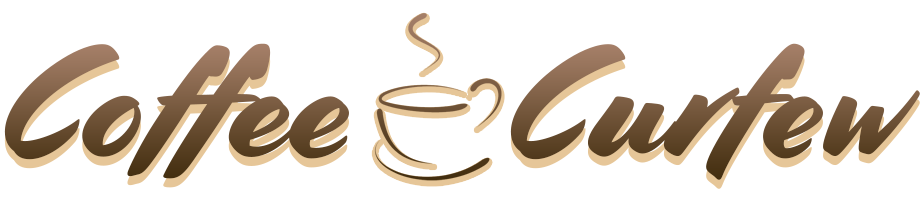
<style>
.page{position:relative;width:924px;height:200px;background:#ffffff}
.page>*{position:absolute;margin:0}
.t1{font:158.3px "Cortado";letter-spacing:0.01em}
</style>
<div class="page">
<p class="t1" style="left:4px;top:43px;width:916px;height:137px">Coffee      Curfew</p>
</div>
